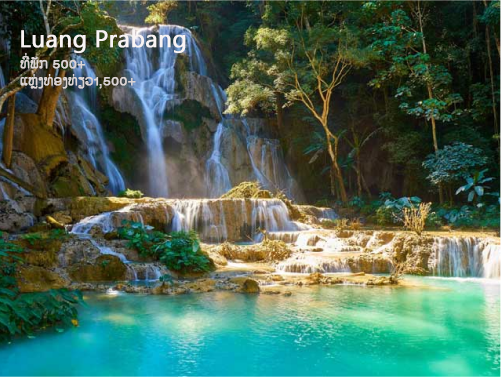
<style>
.page{position:relative;width:501px;height:377px}
.page>*{position:absolute;margin:0}
.t1{font:24px "MicrosoftNewTaiLue";color:#f9f4f4;font-weight:bold}
.t2{font:14px "PhetsarathOT";color:#dcd5d5;font-weight:bold}
</style>
<div class="page">
<p class="t1" style="left:21px;top:29px;width:165px;height:24px">Luang Prabang</p>
<p class="t2" style="left:20px;top:53px;width:116px;height:36px">ທີ່ພັກ 500+<br>ແຫຼ່ງທ່ອງທ່ຽວ1,500+</p>
</div>
